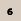
<style>
.page{position:relative;width:21px;height:21px;background:#d9cdc1}
.page>*{position:absolute;margin:0}
.t1{font:9px "Tahoma-Bold";color:#000000}
</style>
<div class="page">
<p class="t1" style="left:7px;top:8px;width:6px;height:7px">6</p>
</div>
